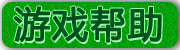
<style>
.page{position:relative;width:180px;height:50px}
.page>*{position:absolute;margin:0}
.t1{font:36px "MicrosoftYaHei";letter-spacing:0.025em;color:#00521e;font-weight:bold}
</style>
<div class="page">
<p class="t1" style="left:13px;top:6px;width:149px;height:37px">游戏帮助</p>
</div>
